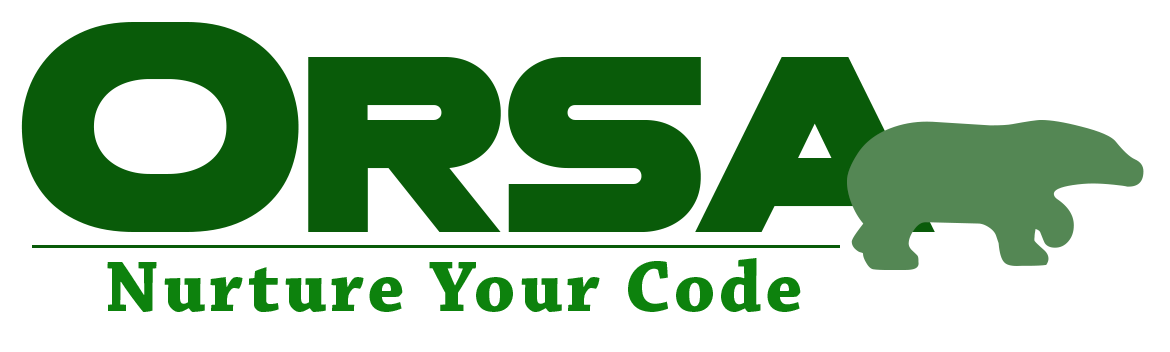
<style>
.page{position:relative;width:1170px;height:352px;background:#ffffff}
.page>*{position:absolute;margin:0}
.t1{font:250px "MesaGrande";color:#095b09}
.t2{font:300px "MesaGrande";color:#095b09}
.t3{font:250px "MesaGrande";letter-spacing:-0.08em;color:#095b09}
.t4{font:150px "Wmanimals2";color:#548754}
.t5{font:75px "ChaparralPro-Bold";letter-spacing:0.05em;color:#0d820d}
</style>
<div class="page">
<p class="t1" style="left:21px;top:22px;width:914px;height:210px"><span class="t2">O</span><span class="t3">R</span>SA</p>
<p class="t4" style="left:847px;top:120px;width:297px;height:150px">e</p>
<p class="t5" style="left:107px;top:258px;width:694px;height:54px">Nurture Your Code</p>
</div>
